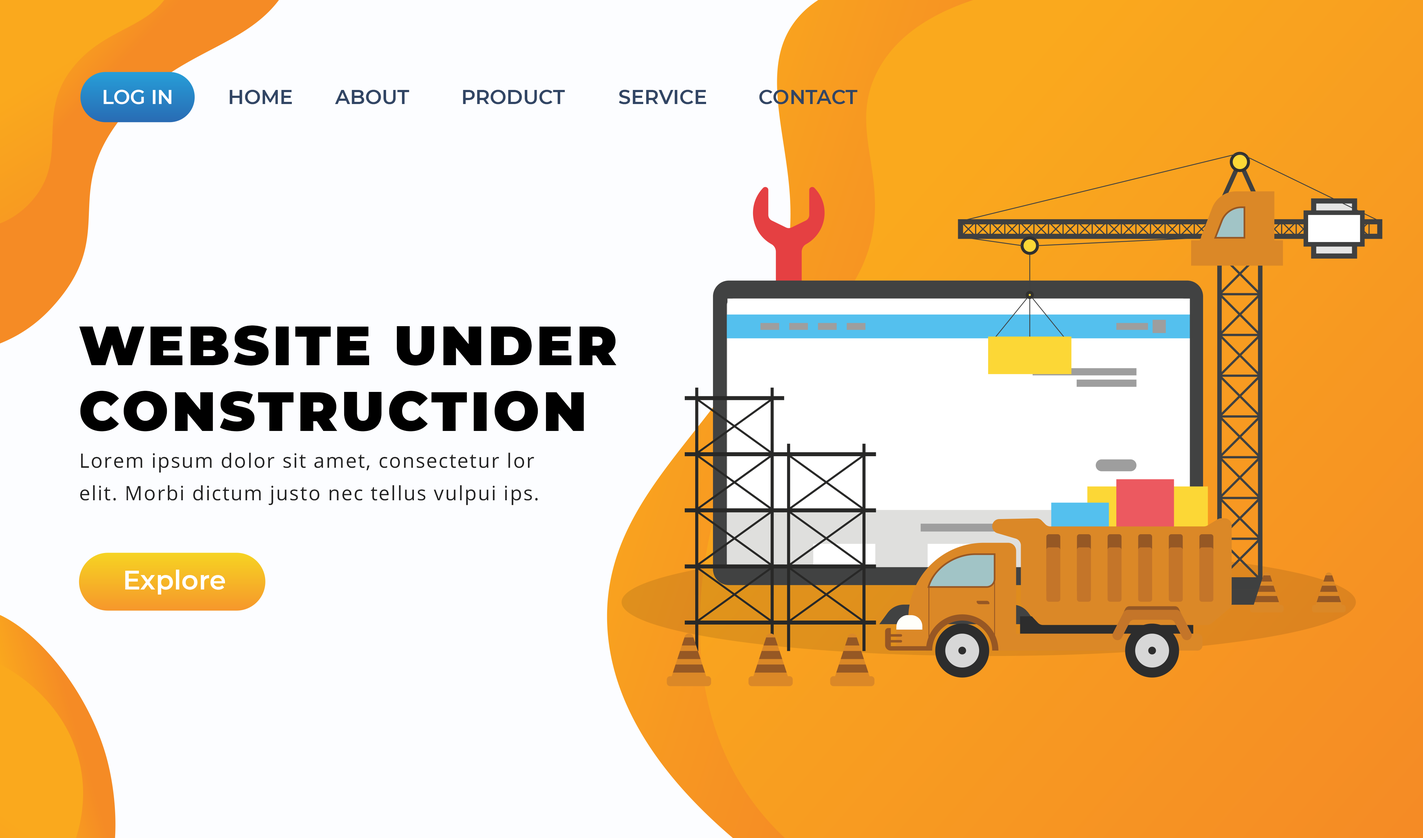
<style>
.page{position:relative;width:1423px;height:838px;background:#fcfdff}
.page>*{position:absolute;margin:0}
.t1{font:19.8px "Montserrat-SemiBold";color:#ffffff}
.t2{font:19.8px "Montserrat-SemiBold";color:#314564}
.t3{font:54.8px/65.8px "Montserrat-Black";letter-spacing:0.06em;color:#000000}
.t4{font:19.8px/32.5px "OpenSans";letter-spacing:0.06em;color:#232323}
.t5{font:26.6px "Montserrat-SemiBold";color:#ffffff}
</style>
<div class="page">
<p class="t1" style="left:104px;top:90px;width:68px;height:14px">LOG IN</p>
<p class="t2" style="left:230px;top:90px;width:62px;height:14px">HOME</p>
<p class="t2" style="left:335px;top:90px;width:74px;height:14px">ABOUT</p>
<p class="t2" style="left:463px;top:90px;width:102px;height:14px">PRODUCT</p>
<p class="t2" style="left:619px;top:90px;width:87px;height:14px">SERVICE</p>
<p class="t2" style="left:759px;top:90px;width:98px;height:14px">CONTACT</p>
<p class="t3" style="left:79px;top:325px;width:538px;height:106px">WEBSITE UNDER<br>CONSTRUCTION</p>
<p class="t4" style="left:80px;top:453px;width:458px;height:52px">Lorem ipsum dolor sit amet, consectetur lor<br>elit. Morbi dictum justo nec tellus vulpui ips.</p>
<p class="t5" style="left:125px;top:570px;width:100px;height:25px">Explore</p>
</div>
